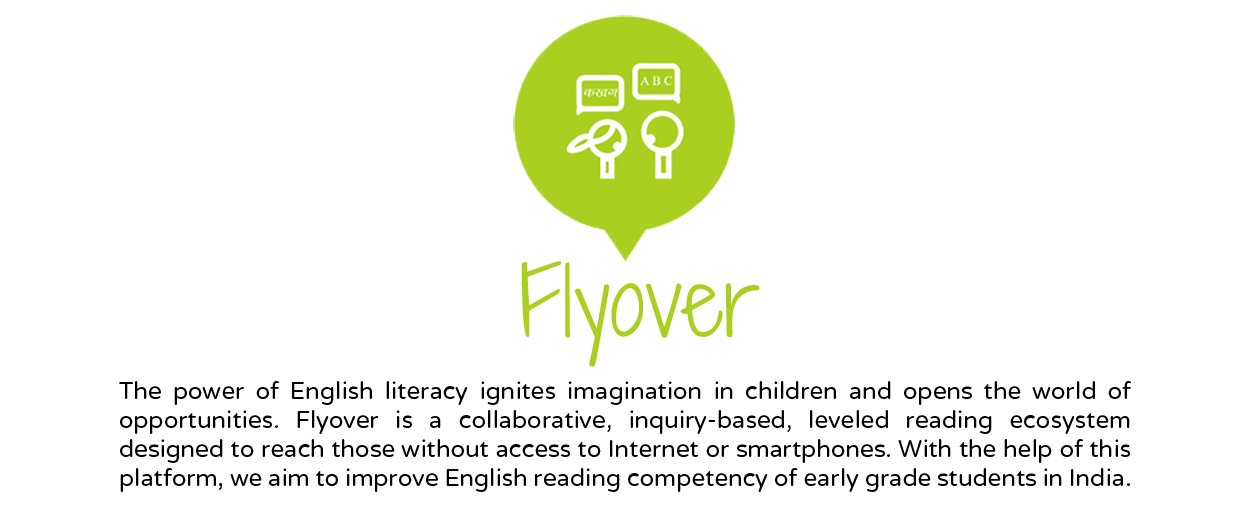
<style>
.page{position:relative;width:1250px;height:516px;background:#ffffff}
.page>*{position:absolute;margin:0}
.t1{font:90px "ShadowsIntoLight";color:#aacf20}
.t2{font:24px "VarelaRound";color:#000000}
</style>
<div class="page">
<p class="t1" style="left:521px;top:261px;width:239px;height:106px">Flyover</p>
<p class="t2" style="left:119px;top:381px;width:1012px;height:111px;text-align:justify">The power of English literacy ignites imagination in children and opens the world of <br>opportunities. Flyover is a collaborative, inquiry-based, leveled reading ecosystem <br>designed to reach those without access to Internet or smartphones. With the help of this platform, we aim to improve English reading competency of early grade students in India.</p>
</div>
